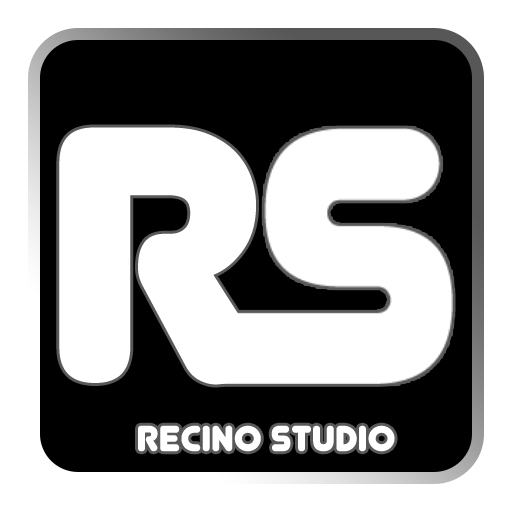
<style>
.page{position:relative;width:512px;height:512px;background:#ffffff}
.page>*{position:absolute;margin:0}
.t1{font:362.5px "Junegull-Regular";color:#ffffff}
.t2{font:36.2px "Junegull-Regular";color:#ffffff}
</style>
<div class="page">
<p class="t1" style="left:59px;top:127px;width:197px;height:258px">R</p>
<p class="t2" style="left:138px;top:425px;width:257px;height:27px">RECINO STUDIO</p>
</div>
